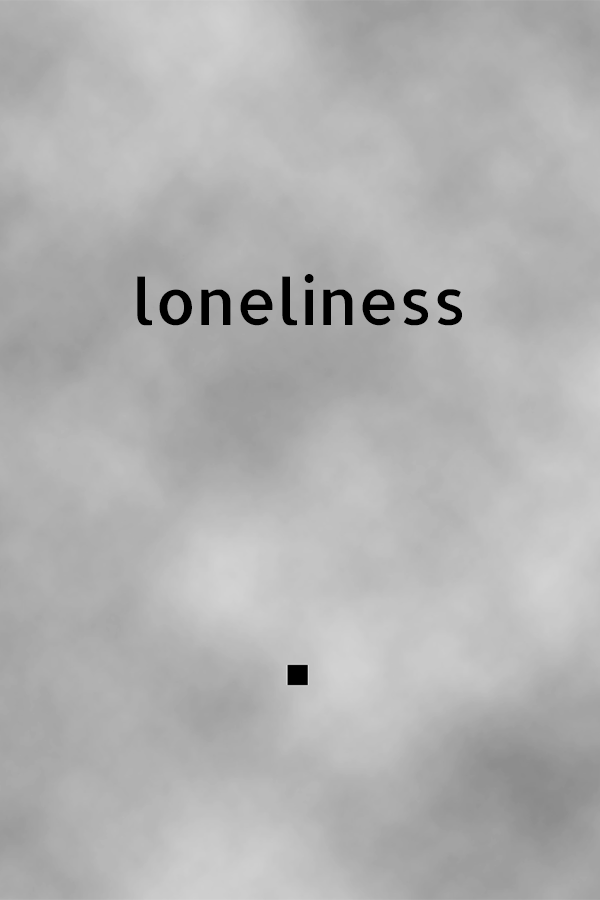
<style>
.page{position:relative;width:600px;height:900px}
.page>*{position:absolute;margin:0}
.t1{font:64px "Allerta-Regular";color:#000000}
</style>
<div class="page">
<p class="t1" style="left:137px;top:274px;width:325px;height:52px">loneliness</p>
</div>
